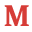
<style>
.page{position:relative;width:32px;height:32px;background:#ffffff}
.page>*{position:absolute;margin:0}
.t1{font:31px "Caladea-Bold";color:#d63c37}
</style>
<div class="page">
<p class="t1" style="left:4px;top:5px;width:25px;height:21px">M</p>
</div>
